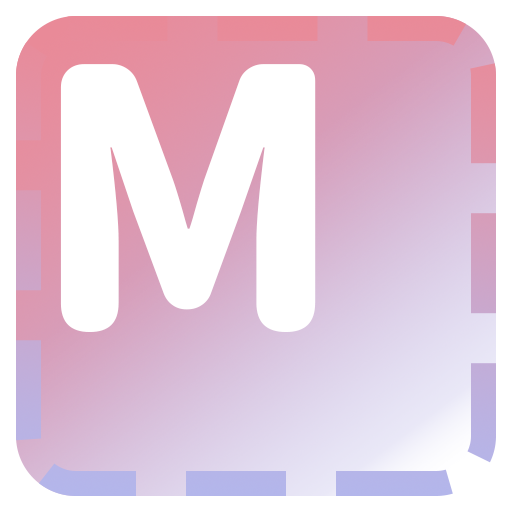
<style>
.page{position:relative;width:512px;height:512px;background:#ffffff}
.page>*{position:absolute;margin:0}
.t1{font:360px "JiangChengYuanTi-700W";color:#ffffff}
</style>
<div class="page">
<p class="t1" style="left:60px;top:64px;width:256px;height:268px">M</p>
</div>
